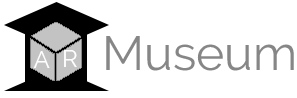
<style>
.page{position:relative;width:297px;height:98px;background:#ffffff}
.page>*{position:absolute;margin:0}
.t1{font:48px "Raleway-Regular";color:#868686}
.t2{font:24px "Raleway-Regular";color:#ffffff}
</style>
<div class="page">
<p class="t1" style="left:106px;top:36px;width:188px;height:35px">Museum</p>
<p class="t2" style="left:33px;top:51px;width:17px;height:17px">A</p>
<p class="t2" style="left:64px;top:50px;width:13px;height:17px">R</p>
</div>
